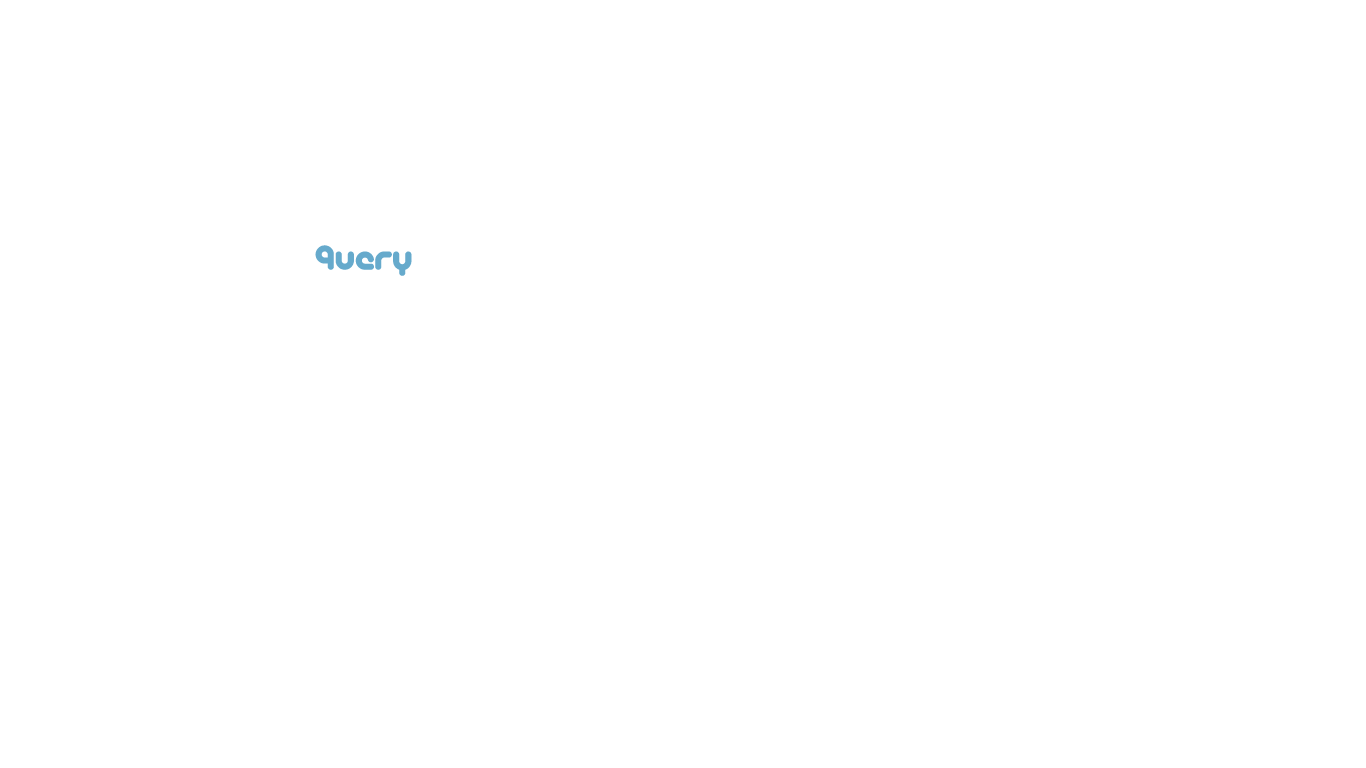
<style>
.page{position:relative;width:1366px;height:768px;background:#ffffff}
.page>*{position:absolute;margin:0}
.t1{font:36px "PicoBlackAl";color:#66aacc}
</style>
<div class="page">
<p class="t1" style="left:315px;top:245px;width:97px;height:31px">Query</p>
</div>
